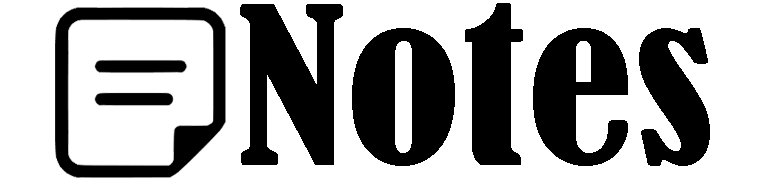
<style>
.page{position:relative;width:766px;height:184px;background:#ffffff}
.page>*{position:absolute;margin:0}
.t1{font:203.8px "BernardMT-Condensed";color:#000000;scale:1.18 1}
</style>
<div class="page">
<p class="t1" style="left:240px;top:3px;width:470px;height:163px">Notes</p>
</div>
